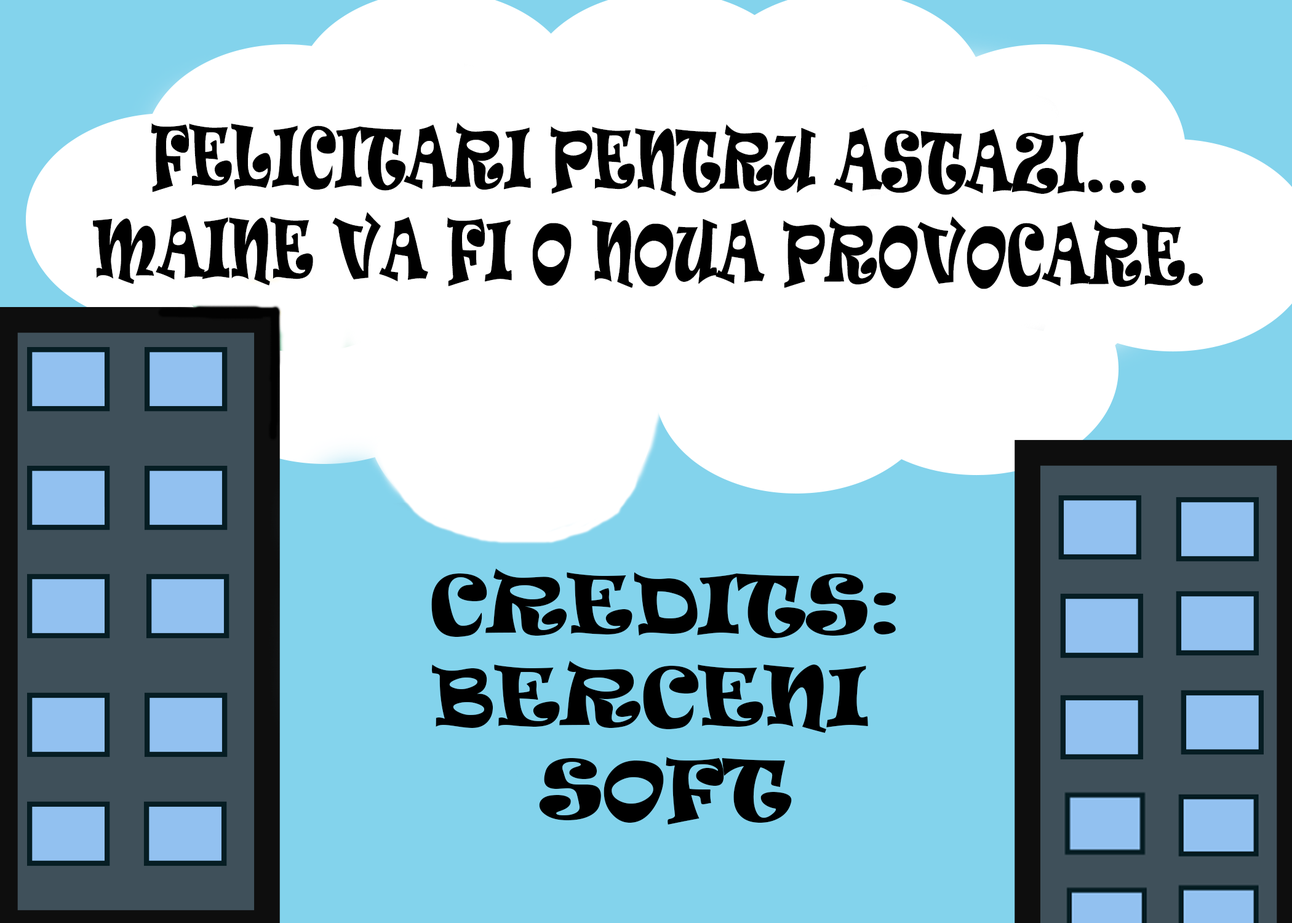
<style>
.page{position:relative;width:1292px;height:923px;background:#ffffff}
.page>*{position:absolute;margin:0}
.t1{font:76.9px "Ravie";color:#000000;text-transform:uppercase;scale:0.65 1}
.t2{font:76.9px "Ravie";color:#000000;text-transform:uppercase}
</style>
<div class="page">
<p class="t1" style="left:93px;top:122px;width:1110px;height:167px;text-align:center">Felicitari pentru astazi...<br>Maine va fi o noua provocare.</p>
<p class="t2" style="left:431px;top:569px;width:465px;height:255px;text-align:center">CreditS:<br>Berceni <br>Soft</p>
</div>
